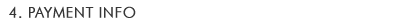
<style>
.page{position:relative;width:400px;height:24px;background:#ffffff}
.page>*{position:absolute;margin:0}
.t1{font:14.7px "FuturaBT-Light";letter-spacing:0.025em;color:#363636;text-transform:uppercase;font-weight:bold}
</style>
<div class="page">
<p class="t1" style="left:9px;top:6px;width:127px;height:12px">4. payment info</p>
</div>
